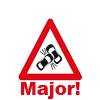
<style>
.page{position:relative;width:100px;height:100px;background:#ffffff}
.page>*{position:absolute;margin:0}
.t1{font:18px "Arial-Black";color:#db0815}
</style>
<div class="page">
<p class="t1" style="left:21px;top:82px;width:59px;height:17px">Major!</p>
</div>
